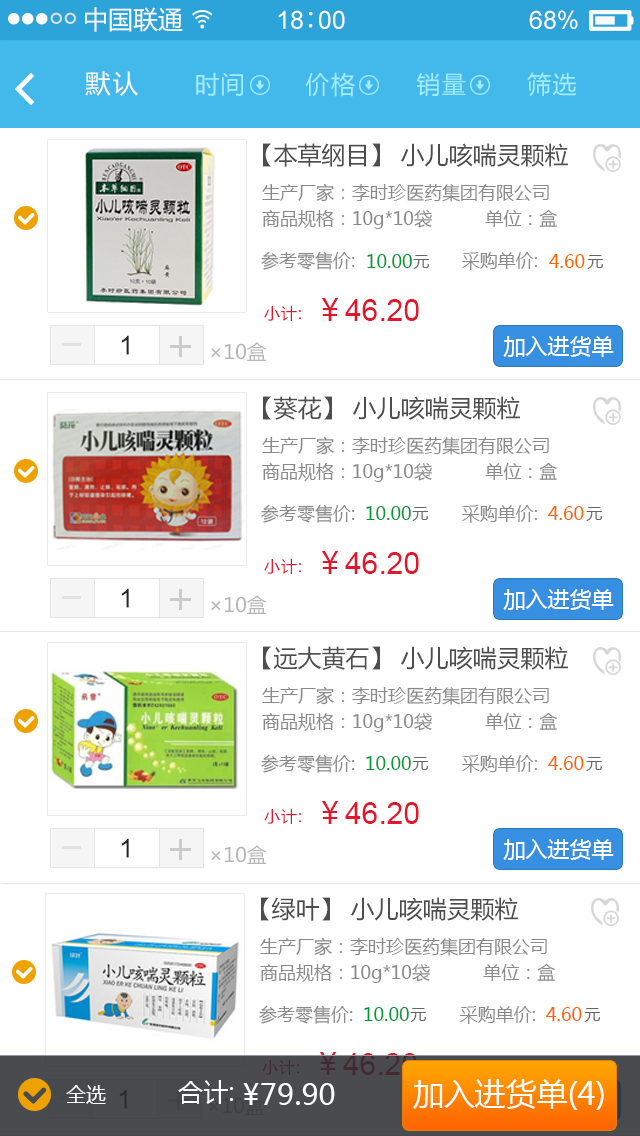
<style>
.page{position:relative;width:640px;height:1136px;background:#ffffff}
.page>*{position:absolute;margin:0}
.t1{font:25px "MicrosoftYaHei";color:#f9f9f9;text-transform:uppercase}
.t2{font:25px "ArialMT";color:#f9f9f9;text-transform:uppercase}
.t3{font:25px "SimSun";color:#f9f9f9;text-transform:uppercase}
.t4{font:26px "MicrosoftYaHei";letter-spacing:0.06em;color:#fafafa;text-transform:uppercase}
.t5{font:24px "MicrosoftYaHei";letter-spacing:0.06em;color:#a1edff;text-transform:uppercase}
.t6{font:24px "MicrosoftYaHei";color:#4d4d4d}
.t7{font:18px/26px "MicrosoftYaHei";color:#8a8a8a}
.t8{font:18px "MicrosoftYaHei";color:#8a8a8a}
.t9{font:18px "MicrosoftYaHei";color:#009933}
.t10{font:16px "MicrosoftYaHei";color:#666666}
.t11{font:18px "MicrosoftYaHei";color:#fb6600}
.t12{font:16px "MicrosoftYaHei";letter-spacing:0.06em;color:#df182d;text-transform:uppercase}
.t13{font:30px "ArialMT";color:#df182d}
.t14{font:30px "MicrosoftYaHei";color:#df182d}
.t15{font:26px "ArialMT";color:#252525;text-transform:uppercase}
.t16{font:20px "MicrosoftYaHei";color:#b6b6b6;text-transform:uppercase}
.t17{font:22px "MicrosoftYaHei";color:#ffffff;text-transform:uppercase}
.t18{font:16px "MicrosoftYaHei";letter-spacing:0.06em;color:#442930;text-transform:uppercase}
.t19{font:30px "ArialMT";color:#442930}
.t20{font:30px "MicrosoftYaHei";color:#442930}
.t21{font:20px "MicrosoftYaHei";color:#fffefe;text-transform:uppercase}
.t22{font:25.3px "MicrosoftYaHei";color:#ffffff;text-transform:uppercase}
.t23{font:29.4px "MicrosoftYaHei";color:#ffffff;text-transform:uppercase}
.t24{font:30.9px "MicrosoftYaHei";color:#ffffff;text-transform:uppercase}
</style>
<div class="page">
<p class="t1" style="left:85px;top:7px;width:98px;height:25px">中国联通</p>
<p class="t2" style="left:278px;top:10px;width:67px;height:19px">18<span class="t3">∶</span>00</p>
<p class="t2" style="left:529px;top:10px;width:49px;height:19px">68%</p>
<p class="t4" style="left:85px;top:71px;width:53px;height:25px">默认</p>
<p class="t5" style="left:196px;top:72px;width:380px;height:25px">时间       价格       销量       筛选</p>
<p class="t6" style="left:263px;top:143px;width:305px;height:24px">【本草纲目】 小儿咳喘灵颗粒</p>
<p class="t7" style="left:262px;top:183px;width:295px;height:46px">生产厂家：李时珍医药集团有限公司<br>商品规格：10g*10袋          单位：盒</p>
<p class="t8" style="left:261px;top:251px;width:276px;height:19px">参考零售价:                    采购单价:</p>
<p class="t9" style="left:367px;top:254px;width:45px;height:14px">10.00</p>
<p class="t10" style="left:413px;top:255px;width:16px;height:14px">元</p>
<p class="t11" style="left:549px;top:254px;width:36px;height:14px">4.60</p>
<p class="t10" style="left:587px;top:255px;width:16px;height:14px">元</p>
<p class="t12" style="left:264px;top:305px;width:37px;height:16px">小计:</p>
<p class="t13" style="left:321px;top:298px;width:98px;height:23px"><span class="t14">￥</span>46.20</p>
<p class="t15" style="left:121px;top:335px;width:8px;height:20px">1</p>
<p class="t16" style="left:211px;top:342px;width:56px;height:19px">×10盒</p>
<p class="t17" style="left:503px;top:336px;width:111px;height:21px">加入进货单</p>
<p class="t6" style="left:263px;top:396px;width:257px;height:24px">【葵花】 小儿咳喘灵颗粒</p>
<p class="t7" style="left:262px;top:436px;width:295px;height:46px">生产厂家：李时珍医药集团有限公司<br>商品规格：10g*10袋          单位：盒</p>
<p class="t8" style="left:261px;top:504px;width:276px;height:19px">参考零售价:                    采购单价:</p>
<p class="t9" style="left:366px;top:506px;width:45px;height:14px">10.00</p>
<p class="t10" style="left:412px;top:507px;width:16px;height:14px">元</p>
<p class="t11" style="left:548px;top:506px;width:36px;height:14px">4.60</p>
<p class="t10" style="left:586px;top:507px;width:16px;height:14px">元</p>
<p class="t12" style="left:264px;top:558px;width:37px;height:16px">小计:</p>
<p class="t13" style="left:321px;top:551px;width:98px;height:23px"><span class="t14">￥</span>46.20</p>
<p class="t15" style="left:121px;top:588px;width:8px;height:20px">1</p>
<p class="t17" style="left:503px;top:589px;width:111px;height:21px">加入进货单</p>
<p class="t16" style="left:211px;top:595px;width:56px;height:19px">×10盒</p>
<p class="t6" style="left:263px;top:646px;width:305px;height:24px">【远大黄石】 小儿咳喘灵颗粒</p>
<p class="t7" style="left:262px;top:686px;width:295px;height:46px">生产厂家：李时珍医药集团有限公司<br>商品规格：10g*10袋          单位：盒</p>
<p class="t8" style="left:261px;top:754px;width:276px;height:19px">参考零售价:                    采购单价:</p>
<p class="t9" style="left:366px;top:756px;width:45px;height:14px">10.00</p>
<p class="t10" style="left:412px;top:757px;width:16px;height:14px">元</p>
<p class="t11" style="left:548px;top:756px;width:36px;height:14px">4.60</p>
<p class="t10" style="left:586px;top:757px;width:16px;height:14px">元</p>
<p class="t12" style="left:264px;top:808px;width:37px;height:16px">小计:</p>
<p class="t13" style="left:321px;top:801px;width:98px;height:23px"><span class="t14">￥</span>46.20</p>
<p class="t15" style="left:121px;top:838px;width:8px;height:20px">1</p>
<p class="t16" style="left:211px;top:845px;width:56px;height:19px">×10盒</p>
<p class="t17" style="left:503px;top:839px;width:111px;height:21px">加入进货单</p>
<p class="t6" style="left:261px;top:897px;width:257px;height:24px">【绿叶】 小儿咳喘灵颗粒</p>
<p class="t7" style="left:260px;top:937px;width:295px;height:46px">生产厂家：李时珍医药集团有限公司<br>商品规格：10g*10袋          单位：盒</p>
<p class="t8" style="left:259px;top:1005px;width:276px;height:19px">参考零售价:                    采购单价:</p>
<p class="t9" style="left:364px;top:1007px;width:45px;height:14px">10.00</p>
<p class="t10" style="left:410px;top:1008px;width:16px;height:14px">元</p>
<p class="t11" style="left:546px;top:1007px;width:36px;height:14px">4.60</p>
<p class="t10" style="left:584px;top:1008px;width:16px;height:14px">元</p>
<p class="t18" style="left:262px;top:1059px;width:37px;height:16px">小计:</p>
<p class="t19" style="left:319px;top:1052px;width:98px;height:23px"><span class="t20">￥</span>46.20</p>
<p class="t21" style="left:66px;top:1085px;width:40px;height:19px">全选</p>
<p class="t22" style="left:178px;top:1080px;width:56px;height:24px">合计:</p>
<p class="t23" style="left:243px;top:1083px;width:92px;height:22px">¥79.90</p>
<p class="t24" style="left:413px;top:1079px;width:191px;height:31px">加入进货单(4)</p>
<p class="t15" style="left:119px;top:1089px;width:8px;height:20px">1</p>
</div>
